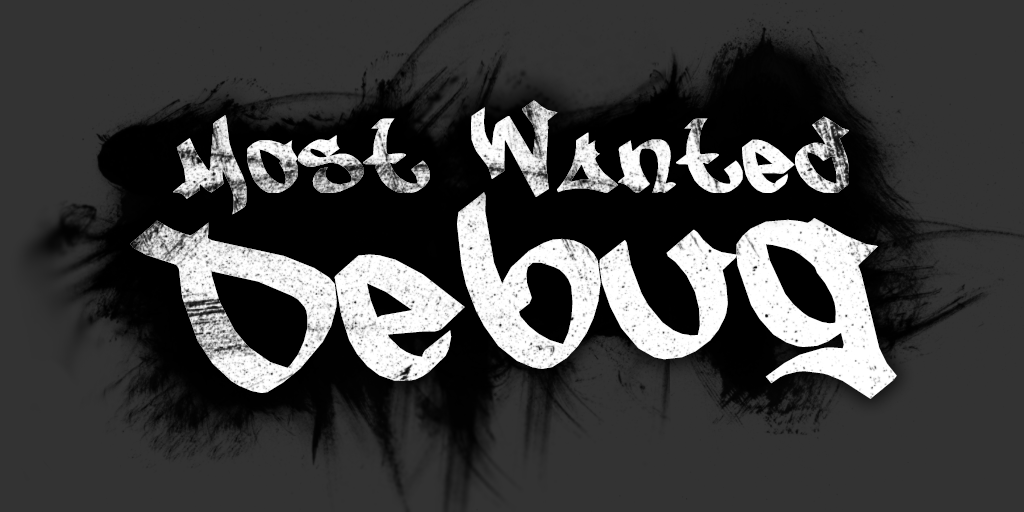
<style>
.page{position:relative;width:1024px;height:512px;background:#333333}
.page>*{position:absolute;margin:0}
.t1{font:102px "NfSMW"}
.t2{font:247px "NfSMW";color:#ffffff}
</style>
<div class="page">
<p class="t1" style="left:173px;top:100px;width:676px;height:115px">Most Wanted</p>
<p class="t2" style="left:130px;top:192px;width:767px;height:207px;rotate:-5deg">Debug</p>
</div>
